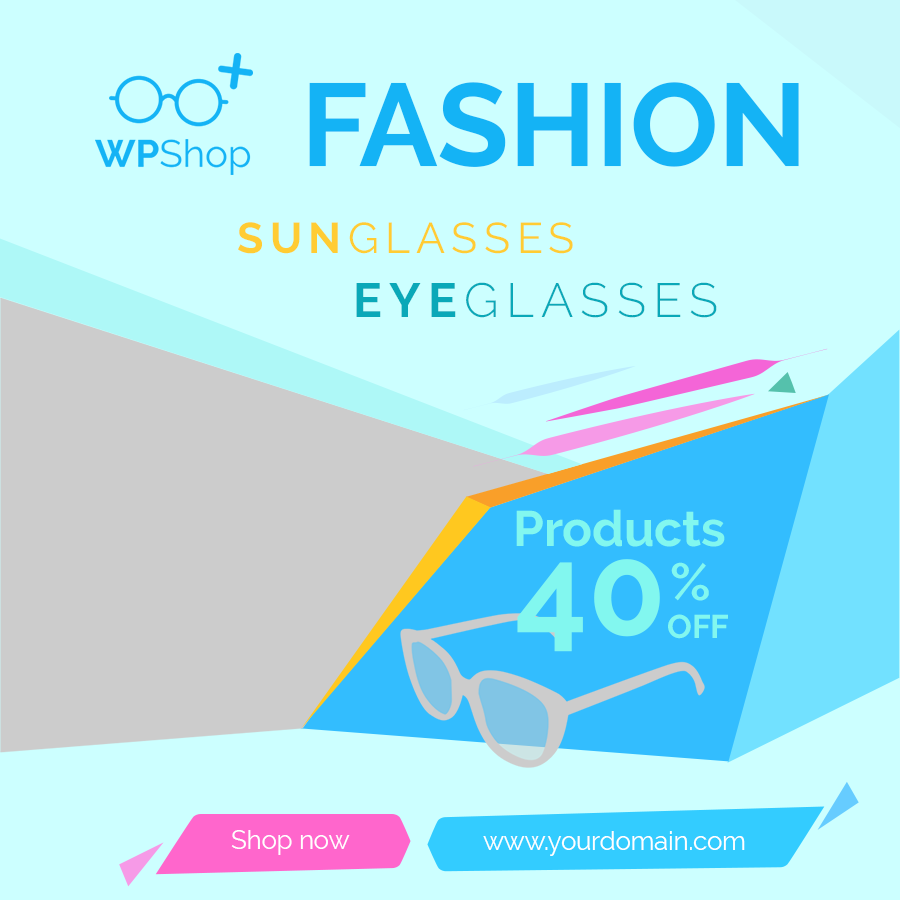
<style>
.page{position:relative;width:900px;height:900px;background:#ccffff}
.page>*{position:absolute;margin:0}
.t1{font:117.4px "Raleway-Bold";color:#14b3f5}
.t2{font:43px "Raleway-Regular";letter-spacing:0.15em;color:#ffcc33}
.t3{font:43px "Raleway-Bold";letter-spacing:0.15em;color:#ffcc33}
.t4{font:48.1px "Raleway-Light";letter-spacing:0.15em;color:#0aa8b8}
.t5{font:48.1px "Raleway-Bold";letter-spacing:0.15em;color:#0aa8b8}
.t6{font:49.5px "Raleway-Bold";color:#82f7ef}
.t7{font:126.6px "Raleway-Bold";color:#82f7ef}
.t8{font:51.8px "Raleway-Bold";color:#82f7ef}
.t9{font:32.9px "Raleway-Bold";color:#82f7ef}
.t10{font:25.5px "Raleway-Regular";color:#ffffff}
</style>
<div class="page">
<p class="t1" style="left:309px;top:82px;width:490px;height:85px">FASHION</p>
<p class="t2" style="left:238px;top:222px;width:335px;height:32px"><span class="t3">SUN</span>GLASSES</p>
<p class="t4" style="left:356px;top:282px;width:361px;height:36px"><span class="t5">EYE</span>GLASSES</p>
<p class="t6" style="left:516px;top:509px;width:209px;height:38px">Products</p>
<p class="t7" style="left:517px;top:559px;width:143px;height:93px">40</p>
<p class="t8" style="left:671px;top:562px;width:38px;height:39px">%</p>
<p class="t9" style="left:668px;top:614px;width:60px;height:25px">OFF</p>
<p class="t10" style="left:231px;top:830px;width:119px;height:25px">Shop now</p>
<p class="t10" style="left:483px;top:831px;width:262px;height:25px">www.yourdomain.com</p>
</div>
